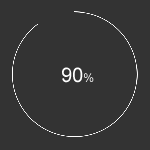
<style>
.page{position:relative;width:150px;height:150px;background:#333333}
.page>*{position:absolute;margin:0}
.t1{font:20px "ArialMT";color:#ffffff}
.t2{font:12px "ArialMT";color:#ffffff}
</style>
<div class="page">
<p class="t1" style="left:62px;top:67px;width:32px;height:16px">90<span class="t2">%</span></p>
</div>
